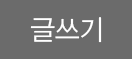
<style>
.page{position:relative;width:132px;height:59px;background:#6b6b6b}
.page>*{position:absolute;margin:0}
.t1{font:28px "YDVYGO32";color:#ffffff;scale:0.95 1}
</style>
<div class="page">
<p class="t1" style="left:30px;top:17px;width:72px;height:26px">글쓰기</p>
</div>
